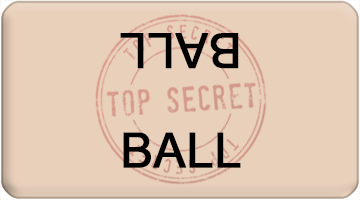
<style>
.page{position:relative;width:360px;height:200px;background:#e8d0bb}
.page>*{position:absolute;margin:0}
.t1{font:48px "ArialMT";color:#000000;font-weight:bold}
</style>
<div class="page">
<p class="t1" style="left:120px;top:33px;width:119px;height:36px;rotate:180deg">BALL</p>
<p class="t1" style="left:123px;top:132px;width:118px;height:36px">BALL</p>
</div>
